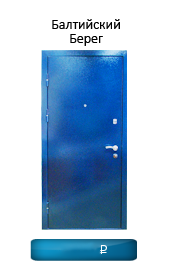
<style>
.page{position:relative;width:170px;height:267px;background:#ffffff}
.page>*{position:absolute;margin:0}
.t1{font:14px/14px "Calibri";color:#000000}
</style>
<div class="page">
<p class="t1" style="left:52px;top:19px;width:68px;height:27px;text-align:center">Балтийский Берег</p>
</div>
